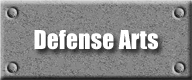
<style>
.page{position:relative;width:192px;height:80px}
.page>*{position:absolute;margin:0}
.t1{font:24px "Impact";color:#ffffff}
</style>
<div class="page">
<p class="t1" style="left:34px;top:30px;width:124px;height:20px">Defense Arts</p>
</div>
